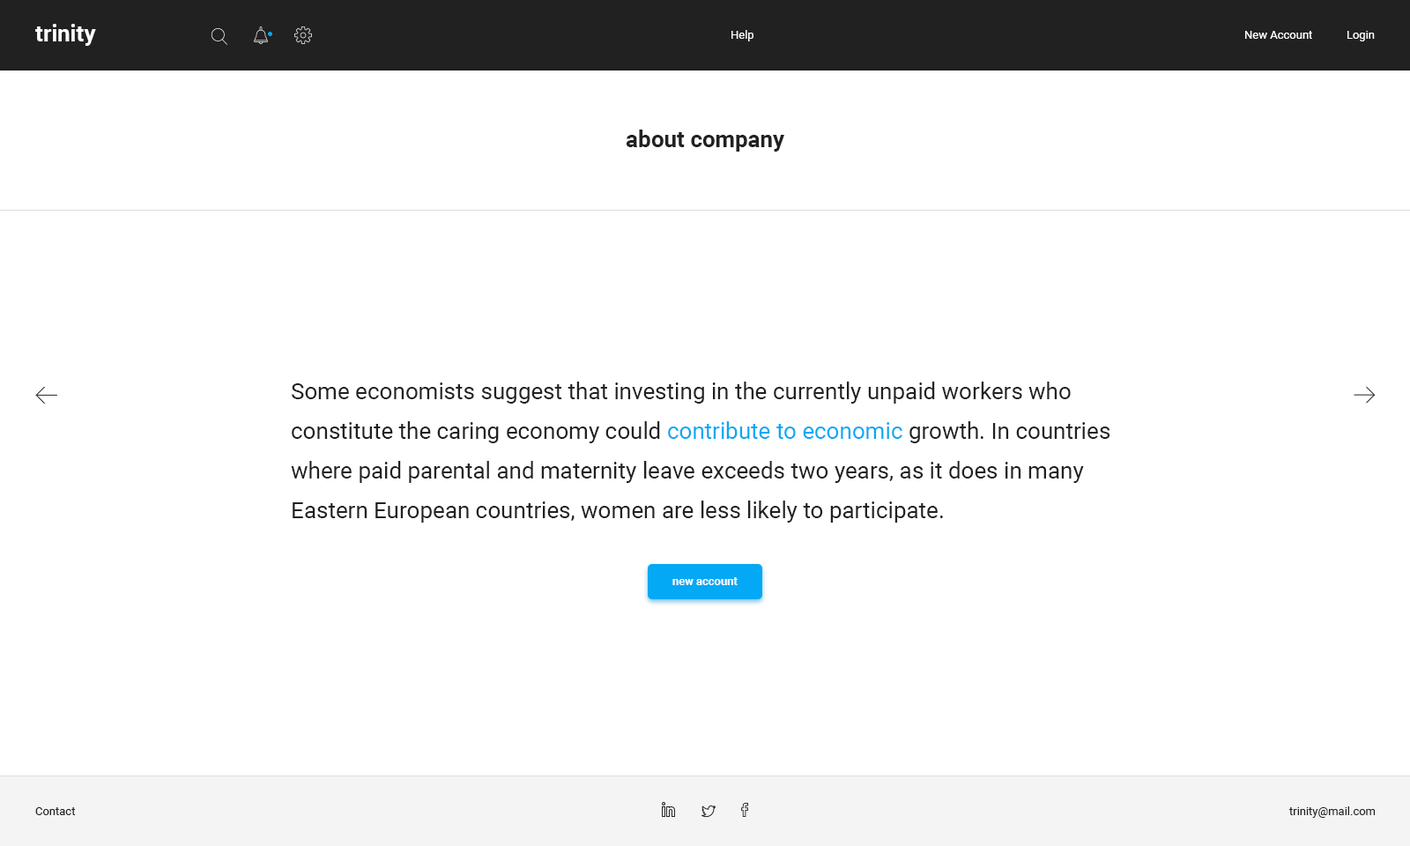
<style>
.page{position:relative;width:1410px;height:846px;background:#ffffff}
.page>*{position:absolute;margin:0}
.t1{font:22.9px "Roboto-Bold";color:#ffffff}
.t2{font:11.5px "Roboto-Regular";color:#ffffff}
.t3{font:22.9px "Roboto-Bold";color:#212121}
.t4{font:22.9px/39.6px "Roboto-Regular";color:#212121}
.t5{font:22.9px/39.6px "Roboto-Regular";color:#03a9f4}
.t6{font:11.5px "Roboto-Bold";color:#ffffff}
.t7{font:11.5px "Roboto-Regular";color:#212121}
</style>
<div class="page">
<p class="t1" style="left:35px;top:24px;width:61px;height:22px">trinity</p>
<p class="t2" style="left:731px;top:30px;width:22px;height:11px">Help</p>
<p class="t2" style="left:1245px;top:31px;width:130px;height:10px">New Account            Login</p>
<p class="t3" style="left:626px;top:130px;width:158px;height:22px">about company</p>
<p class="t4" style="left:291px;top:382px;width:819px;height:140px">Some economists suggest that investing in the currently unpaid workers who constitute the caring economy could <span class="t5">contribute to economic</span> growth. In countries where paid parental and maternity leave exceeds two years, as it does in many Eastern European countries, women are less likely to participate.</p>
<p class="t6" style="left:672px;top:577px;width:65px;height:8px">new account</p>
<p class="t7" style="left:35px;top:807px;width:41px;height:8px">Contact</p>
<p class="t7" style="left:1288px;top:806px;width:87px;height:12px">trinity@mail.com</p>
</div>
